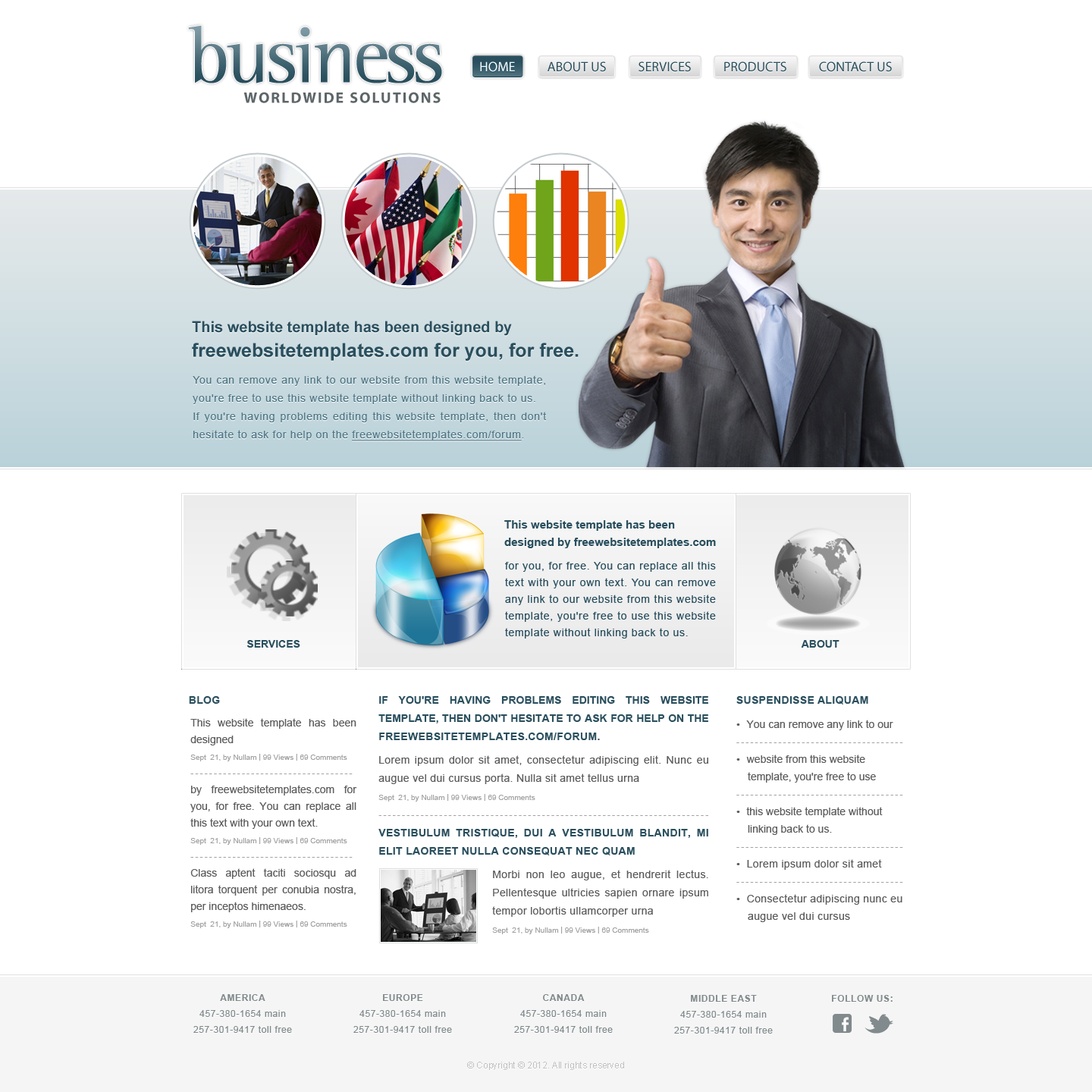
<style>
.page{position:relative;width:1092px;height:1092px;background:#ffffff}
.page>*{position:absolute;margin:0}
.t1{font:81.2px "LeftistMonoSerif";letter-spacing:-0.05em}
.t2{font:13.6px "MyriadPro-Regular";color:#2a4f5e}
.t3{font:13.6px "MyriadPro-Regular";color:#ffffff}
.t4{font:15.2px "MyriadPro-Bold";letter-spacing:0.1em;color:#5d6568;text-transform:uppercase}
.t5{font:15.2px "Arial-BoldMT";color:#2a4f5e}
.t6{font:19px "Arial-BoldMT";color:#2a4f5e}
.t7{font:10.6px/18.2px "ArialMT";letter-spacing:0.05em;color:#507685}
.t8{font:10.6px/18.2px "ArialMT";letter-spacing:0.05em;color:#507685;text-decoration:underline}
.t9{font:11.4px/17.4px "Arial-BoldMT";color:#2a4f5e}
.t10{font:10.6px/16.7px "ArialMT";letter-spacing:0.05em;color:#2a4f5e}
.t11{font:10.6px "Arial-BoldMT";color:#2a4f5e;text-transform:uppercase}
.t12{font:10.6px "Arial-BoldMT";letter-spacing:0.025em;color:#2a4f5e;text-transform:uppercase}
.t13{font:10.6px/18.2px "ArialMT";letter-spacing:0.025em;color:#5d5d5d}
.t14{font:10.6px/18.2px "Arial-BoldMT";color:#2a4f5e;text-transform:uppercase}
.t15{font:10.6px/18.2px "Arial-BoldMT";letter-spacing:0.025em;color:#2a4f5e;text-transform:uppercase}
.t16{font:7.6px/18.2px "ArialMT";color:#a2a2a2}
.t17{font:9.1px/18.2px "ArialMT";letter-spacing:0.18em;color:#a2a2a2}
.t18{font:10.6px/16.7px "ArialMT";color:#5d5d5d}
.t19{font:7.6px/16.7px "ArialMT";color:#a2a2a2}
.t20{font:9.1px/16.7px "ArialMT";letter-spacing:0.18em;color:#a2a2a2}
.t21{font:10.6px/17.4px "ArialMT";color:#5d5d5d}
.t22{font:10.6px/17.4px "ArialMT";letter-spacing:0.025em;color:#5d5d5d}
.t23{font:9.1px/17.4px "ArialMT";letter-spacing:0.18em;color:#a2a2a2}
.t24{font:9.1px/15.9px "ArialMT";letter-spacing:0.05em;color:#818a8c}
.t25{font:9.1px/15.9px "Arial-BoldMT";letter-spacing:0.05em;color:#818a8c;text-transform:uppercase}
.t26{font:9.1px "Arial-BoldMT";letter-spacing:0.05em;color:#818a8c;text-transform:uppercase}
.t27{font:9.1px "ArialMT";color:#c1c1c1}
</style>
<div class="page">
<p class="t1" style="left:188px;top:25px;width:254px;height:58px">business</p>
<p class="t2" style="left:480px;top:61px;width:412px;height:11px">HOME           ABOUT US           SERVICES           PRODUCTS           CONTACT US</p>
<p class="t3" style="left:480px;top:61px;width:35px;height:11px">HOME</p>
<p class="t4" style="left:243px;top:92px;width:198px;height:11px">worldwide Solutions</p>
<p class="t5" style="left:192px;top:321px;width:320px;height:15px">This website template has been designed by</p>
<p class="t6" style="left:192px;top:343px;width:387px;height:18px">freewebsitetemplates.com for you, for free.</p>
<p class="t7" style="left:193px;top:375px;width:354px;height:66px;text-align:justify">You can remove any link to our website from this website template, you're free to use this website template without linking back to us.<br>If you're having problems editing this website template, then don't hesitate to ask for help on the <span class="t8">freewebsitetemplates.com/forum</span>.</p>
<p class="t9" style="left:504px;top:520px;width:212px;height:28px;text-align:justify">This website template has been<br>designed by freewebsitetemplates.com</p>
<p class="t10" style="left:505px;top:561px;width:211px;height:78px;text-align:justify">for you, for free. You can replace all this text with your own text. You can remove any link to our website from this website template, you're free to use this website template without linking back to us.</p>
<p class="t11" style="left:247px;top:640px;width:53px;height:8px">SERVICES</p>
<p class="t11" style="left:801px;top:640px;width:38px;height:8px">about</p>
<p class="t12" style="left:189px;top:696px;width:31px;height:8px">Blog</p>
<p class="t13" style="left:378px;top:696px;width:330px;height:238px;text-align:justify"><span class="t14">If you're having problems editing this website template, then don't hesitate to ask for help on the </span><span class="t15">freewebsitetemplates.com/forum.<br></span>Lorem ipsum dolor sit amet, consectetur adipiscing elit. Nunc eu augue vel dui cursus porta. Nulla sit amet tellus urna<br><span class="t16">Sept  21, by Nullam | 99 Views | 69 Comments<br></span><span class="t17">-----------------------------------------------------------------------<br></span><span class="t15">Vestibulum tristique, dui a vestibulum blandit, mi elit laoreet nulla consequat nec quam<br></span>Morbi non leo augue, et hendrerit lectus. Pellentesque ultricies sapien ornare ipsum tempor lobortis ullamcorper urna<br><span class="t16">Sept  21, by Nullam | 99 Views | 69 Comments</span></p>
<p class="t12" style="left:736px;top:696px;width:132px;height:8px">Suspendisse aliquam</p>
<p class="t18" style="left:190px;top:718px;width:167px;height:210px;text-align:justify">This website template has been designed<br><span class="t19">Sept  21, by Nullam | 99 Views | 69 Comments<br></span><span class="t20">-----------------------------------<br></span>by freewebsitetemplates.com for you, for free. You can replace all this text with your own text.<br><span class="t19">Sept  21, by Nullam | 99 Views | 69 Comments<br></span><span class="t20">-----------------------------------<br></span>Class aptent taciti sociosqu ad litora torquent per conubia nostra, per inceptos himenaeos.<br><span class="t19">Sept  21, by Nullam | 99 Views | 69 Comments</span></p>
<p class="t21" style="left:736px;top:720px;width:167px;height:202px"><span class="t22">•  </span>You can remove any link to our <br><span class="t23">------------------------------------<br></span><span class="t22">•  </span>website from this website template, you're free to use<br><span class="t23">------------------------------------<br></span><span class="t22">• </span> this website template without linking back to us.<br><span class="t23">------------------------------------<br></span><span class="t22">•  Lorem ipsum dolor sit amet<br></span><span class="t23">------------------------------------<br></span><span class="t22">•  Consectetur adipiscing nunc eu augue vel dui cursus</span></p>
<p class="t24" style="left:193px;top:994px;width:99px;height:39px;text-align:center"><span class="t25">America<br></span>457-380-1654 main<br>257-301-9417 toll free</p>
<p class="t24" style="left:353px;top:994px;width:99px;height:39px;text-align:center"><span class="t25">Europe<br></span>457-380-1654 main<br>257-301-9417 toll free</p>
<p class="t24" style="left:514px;top:994px;width:99px;height:39px;text-align:center"><span class="t25">Canada<br></span>457-380-1654 main<br>257-301-9417 toll free</p>
<p class="t24" style="left:674px;top:995px;width:99px;height:39px;text-align:center"><span class="t25">Middle East<br></span>457-380-1654 main<br>257-301-9417 toll free</p>
<p class="t26" style="left:832px;top:995px;width:61px;height:7px">Follow us:</p>
<p class="t27" style="left:467px;top:1062px;width:157px;height:8px">© Copyright © 2012. All rights reserved</p>
</div>
